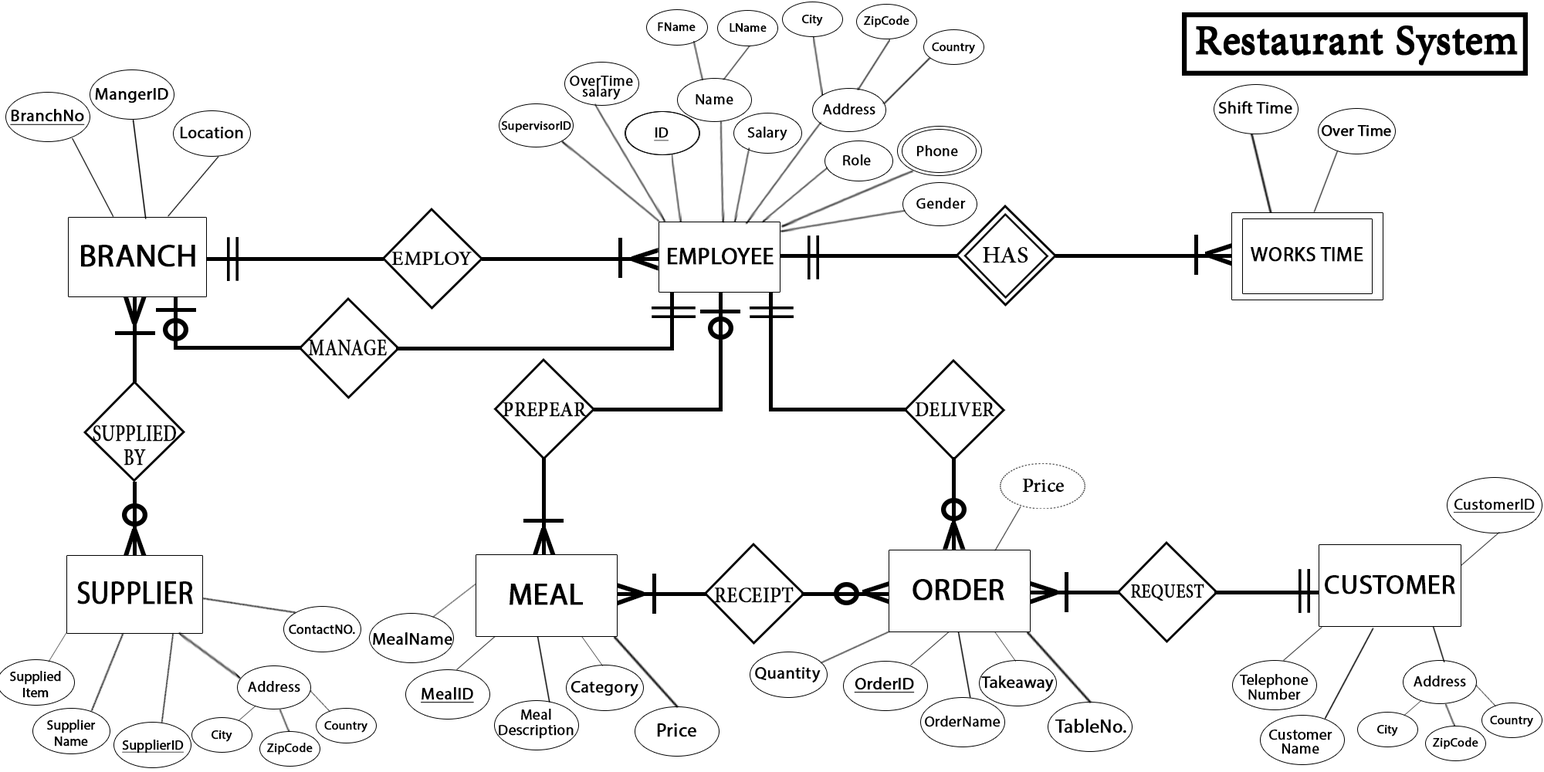
<style>
.page{position:relative;width:1544px;height:772px;background:#ffffff}
.page>*{position:absolute;margin:0}
.t1{font:12.1px "MyriadPro-Regular";color:#000000;font-weight:bold}
.t2{font:12.3px "MyriadPro-Regular";color:#000000;font-weight:bold}
.t3{font:15px/11.2px "MyriadPro-Regular";color:#000000;font-weight:bold}
.t4{font:17px "MyriadPro-Regular";color:#000000;font-weight:bold}
.t5{font:15px "MyriadPro-Regular";color:#000000;font-weight:bold}
.t6{font:16.8px "MyriadPro-Regular";color:#000000;font-weight:bold}
.t7{font:17px "MyriadPro-Regular";color:#000000;font-weight:bold;text-decoration:underline}
.t8{font:14.9px "MyriadPro-Regular";color:#000000;font-weight:bold}
.t9{font:15.9px "MyriadPro-Regular";color:#000000;font-weight:bold}
.t10{font:15px "MyriadPro-Regular";color:#000000;font-weight:bold;text-decoration:underline}
.t11{font:31.8px "MyriadPro-Regular";color:#000000;font-weight:bold}
.t12{font:38.7px "MyriadPro-Regular";color:#000000;font-weight:bold}
.t13{font:26.9px "AdobeArabic-Regular";color:#000000;font-weight:bold}
.t14{font:23.2px "MyriadPro-Regular";color:#000000;font-weight:bold}
.t15{font:32.1px "AdobeArabic-Regular";color:#000000;font-weight:bold}
.t16{font:19.8px "MyriadPro-Regular";color:#000000;font-weight:bold}
.t17{font:31.7px "AdobeArabic-Regular";color:#000000;font-weight:bold;scale:0.77 1}
.t18{font:28.1px "AdobeArabic-Regular";color:#000000;font-weight:bold;scale:0.93 1}
.t19{font:28.1px "AdobeArabic-Regular";color:#000000;font-weight:bold;scale:0.91 1}
.t20{font:31.7px/23.8px "AdobeArabic-Regular";color:#000000;font-weight:bold;scale:0.77 1}
.t21{font:15.5px "MyriadPro-Regular";color:#000000;font-weight:bold;text-decoration:underline}
.t22{font:32.7px "MyriadPro-Regular";color:#000000;font-weight:bold;scale:0.86 1}
.t23{font:30.6px "MyriadPro-Regular";color:#000000;font-weight:bold}
.t24{font:26.7px "MyriadPro-Regular";color:#000000;font-weight:bold}
.t25{font:29.9px "AdobeArabic-Regular";color:#000000;font-weight:bold;scale:0.88 1}
.t26{font:27.4px "AdobeArabic-Regular";color:#000000;font-weight:bold;scale:0.81 1}
.t27{font:13.2px "MyriadPro-Regular";color:#000000;font-weight:bold}
.t28{font:17.2px "MyriadPro-Regular";color:#000000;font-weight:bold}
.t29{font:13.2px/16.1px "MyriadPro-Regular";color:#000000;font-weight:bold}
.t30{font:17.1px "MyriadPro-Regular";color:#000000;font-weight:bold}
.t31{font:14.7px/14.5px "MyriadPro-Regular";color:#000000;font-weight:bold}
.t32{font:14.9px/16.1px "MyriadPro-Regular";color:#000000;font-weight:bold}
.t33{font:18.8px "MyriadPro-Regular";color:#000000;font-weight:bold}
.t34{font:18.7px "MyriadPro-Regular";color:#000000;font-weight:bold}
.t35{font:14.9px/14.5px "MyriadPro-Regular";color:#000000;font-weight:bold}
.t36{font:13.2px "MyriadPro-Regular";color:#000000;font-weight:bold;text-decoration:underline}
</style>
<div class="page">
<p class="t1" style="left:802px;top:15px;width:21px;height:11px">City</p>
<p class="t1" style="left:864px;top:15px;width:46px;height:13px">ZipCode</p>
<p class="t2" style="left:658px;top:22px;width:38px;height:10px">FName</p>
<p class="t1" style="left:730px;top:23px;width:37px;height:9px">LName</p>
<p class="t1" style="left:932px;top:42px;width:43px;height:12px">Country</p>
<p class="t3" style="left:570px;top:76px;width:63px;height:24px;text-align:center">OverTime<br>salary</p>
<p class="t4" style="left:95px;top:88px;width:73px;height:15px">MangerID</p>
<p class="t5" style="left:696px;top:94px;width:38px;height:11px">Name</p>
<p class="t6" style="left:1218px;top:101px;width:75px;height:13px">Shift Time</p>
<p class="t7" style="left:10px;top:109px;width:75px;height:16px">BranchNo</p>
<p class="t8" style="left:823px;top:103px;width:53px;height:12px">Address</p>
<p class="t2" style="left:501px;top:121px;width:70px;height:12px">SupervisorID</p>
<p class="t9" style="left:1322px;top:125px;width:69px;height:12px">Over Time</p>
<p class="t4" style="left:180px;top:127px;width:63px;height:12px">Location</p>
<p class="t10" style="left:654px;top:127px;width:15px;height:14px">ID</p>
<p class="t8" style="left:747px;top:127px;width:41px;height:14px">Salary</p>
<p class="t5" style="left:917px;top:145px;width:41px;height:12px">Phone</p>
<p class="t5" style="left:843px;top:154px;width:28px;height:12px">Role</p>
<p class="t8" style="left:917px;top:198px;width:49px;height:11px">Gender</p>
<p class="t11" style="left:81px;top:245px;width:114px;height:22px">BRANCH</p>
<p class="t12" style="left:1205px;top:243px;width:27px;height:23px;rotate:90deg">V</p>
<p class="t13" style="left:391px;top:252px;width:81px;height:14px">EMPLOY</p>
<p class="t12" style="left:632px;top:248px;width:27px;height:23px;rotate:90deg">V</p>
<p class="t14" style="left:668px;top:248px;width:106px;height:17px">EMPLOYEE</p>
<p class="t15" style="left:983px;top:247px;width:46px;height:16px">HAS</p>
<p class="t16" style="left:1251px;top:247px;width:113px;height:15px">WORKS TIME</p>
<p class="t12" style="left:124px;top:297px;width:23px;height:27px">V</p>
<p class="t17" style="left:308px;top:340px;width:79px;height:16px">MANAGE</p>
<p class="t18" style="left:503px;top:402px;width:84px;height:15px">PREPEAR</p>
<p class="t19" style="left:915px;top:402px;width:80px;height:15px">DELIVER</p>
<p class="t20" style="left:93px;top:425px;width:83px;height:41px;text-align:center">SUPPLIED<br>BY</p>
<p class="t13" style="left:1022px;top:479px;width:43px;height:14px">Price</p>
<p class="t21" style="left:1453px;top:499px;width:82px;height:14px">CustomerID</p>
<p class="t12" style="left:124px;top:529px;width:23px;height:27px">V</p>
<p class="t12" style="left:533px;top:528px;width:23px;height:27px">V</p>
<p class="t12" style="left:943px;top:523px;width:23px;height:27px">V</p>
<p class="t22" style="left:77px;top:581px;width:116px;height:24px">SUPPLIER</p>
<p class="t12" style="left:862px;top:581px;width:28px;height:24px;rotate:90deg">V</p>
<p class="t23" style="left:913px;top:579px;width:92px;height:22px">ORDER</p>
<p class="t12" style="left:1031px;top:581px;width:27px;height:24px;rotate:90deg">V</p>
<p class="t24" style="left:1325px;top:575px;width:131px;height:20px">CUSTOMER</p>
<p class="t23" style="left:510px;top:584px;width:73px;height:21px">MEAL</p>
<p class="t12" style="left:617px;top:583px;width:27px;height:23px;rotate:90deg">V</p>
<p class="t25" style="left:714px;top:587px;width:80px;height:16px">RECEIPT</p>
<p class="t26" style="left:1131px;top:584px;width:74px;height:18px">REQUEST</p>
<p class="t27" style="left:289px;top:625px;width:66px;height:10px">ContactNO.</p>
<p class="t28" style="left:373px;top:632px;width:79px;height:14px">MealName</p>
<p class="t29" style="left:10px;top:671px;width:51px;height:27px;text-align:center">Supplied<br>Item</p>
<p class="t30" style="left:755px;top:667px;width:66px;height:16px">Quantity</p>
<p class="t7" style="left:854px;top:677px;width:61px;height:16px">OrderID</p>
<p class="t4" style="left:981px;top:676px;width:73px;height:16px">Takeaway</p>
<p class="t31" style="left:1240px;top:674px;width:69px;height:26px;text-align:center">Telephone<br>Number</p>
<p class="t8" style="left:1414px;top:676px;width:52px;height:11px">Address</p>
<p class="t8" style="left:248px;top:681px;width:52px;height:12px">Address</p>
<p class="t7" style="left:421px;top:687px;width:53px;height:16px">MealID</p>
<p class="t4" style="left:571px;top:681px;width:68px;height:15px">Category</p>
<p class="t32" style="left:499px;top:709px;width:75px;height:30px;text-align:center">Meal<br>Description</p>
<p class="t29" style="left:47px;top:720px;width:49px;height:27px;text-align:center">Supplier<br>Name</p>
<p class="t1" style="left:324px;top:721px;width:44px;height:12px">Country</p>
<p class="t33" style="left:657px;top:724px;width:39px;height:13px">Price</p>
<p class="t8" style="left:925px;top:716px;width:76px;height:11px">OrderName</p>
<p class="t34" style="left:1056px;top:719px;width:71px;height:15px">TableNo.</p>
<p class="t1" style="left:1378px;top:725px;width:20px;height:12px">City</p>
<p class="t1" style="left:1490px;top:716px;width:43px;height:11px">Country</p>
<p class="t1" style="left:212px;top:730px;width:20px;height:12px">City</p>
<p class="t35" style="left:1269px;top:730px;width:64px;height:24px;text-align:center">Customer<br>Name</p>
<p class="t1" style="left:1433px;top:737px;width:46px;height:13px">ZipCode</p>
<p class="t36" style="left:122px;top:740px;width:62px;height:14px">SupplierID</p>
<p class="t1" style="left:267px;top:743px;width:46px;height:12px">ZipCode</p>
</div>
